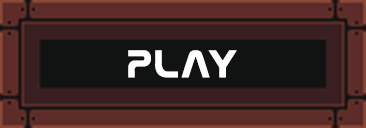
<style>
.page{position:relative;width:366px;height:128px;background:#111312}
.page>*{position:absolute;margin:0}
.t1{font:40.5px "Nasalization";letter-spacing:0.04em;color:#ffffff;font-weight:bold}
</style>
<div class="page">
<p class="t1" style="left:128px;top:50px;width:109px;height:28px">PLAY</p>
</div>
